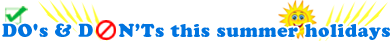
<style>
.page{position:relative;width:392px;height:41px;background:#ffffff}
.page>*{position:absolute;margin:0}
.t1{font:18.2px "CooperBlackStd";letter-spacing:0.025em;color:#0074e0}
</style>
<div class="page">
<p class="t1" style="left:2px;top:23px;width:388px;height:17px">DO's &amp; D    N’Ts this summer holidays</p>
</div>
